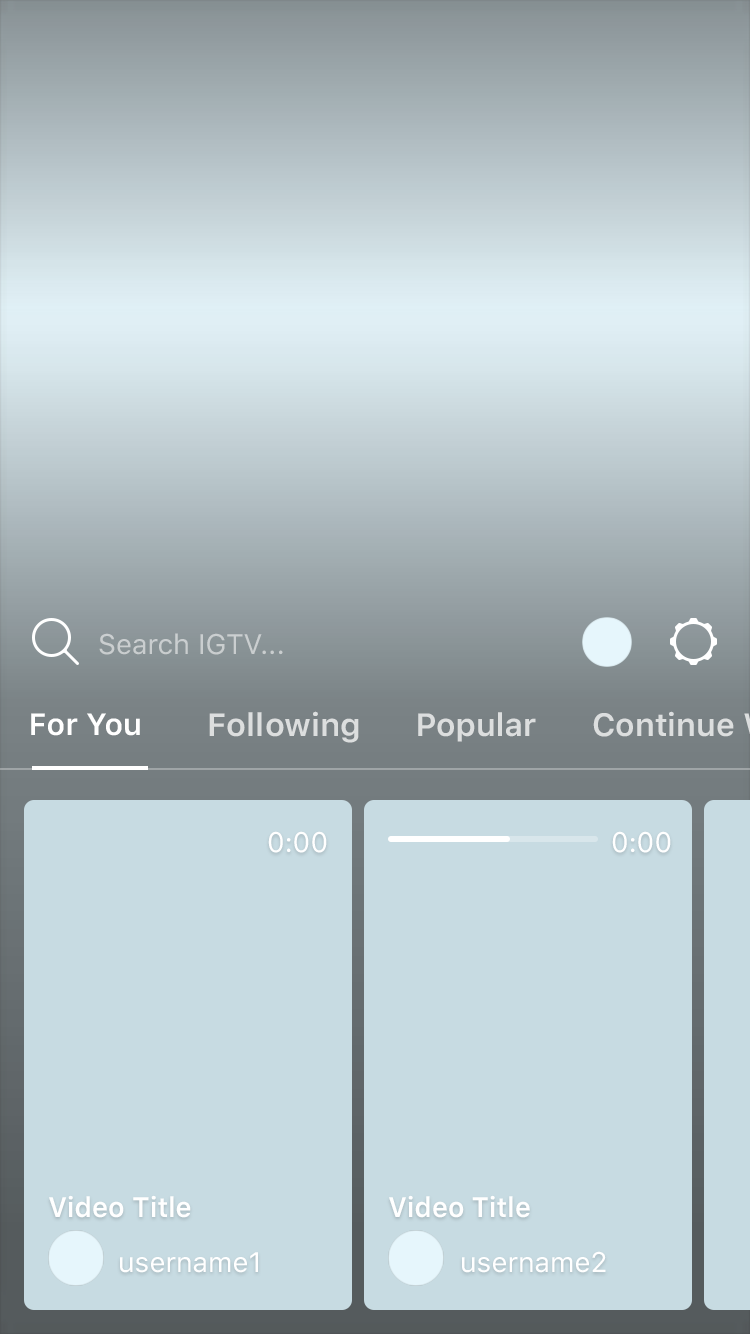
<style>
.page{position:relative;width:750px;height:1334px;background:#c7dbe2}
.page>*{position:absolute;margin:0}
.t1{font:28px "SFUIText-Regular";color:#cacecf}
.t2{font:30.6px "SFUIText-Semibold";color:#ffffff}
.t3{font:32px "SFUIText-Semibold";color:#dcdede}
.t4{font:28px "SFUIText-Regular";color:#ffffff}
.t5{font:28px "SFUIText-Semibold";color:#ffffff}
.t6{font:28px "SFUIText-Semibold";color:#ffffff;scale:0.97 1}
</style>
<div class="page">
<p class="t1" style="left:99px;top:633px;width:184px;height:22px">Search IGTV...</p>
<p class="t2" style="left:31px;top:713px;width:109px;height:23px">For You</p>
<p class="t3" style="left:209px;top:711px;width:150px;height:32px">Following</p>
<p class="t3" style="left:418px;top:712px;width:118px;height:30px">Popular</p>
<p class="t4" style="left:268px;top:831px;width:59px;height:22px">0:00</p>
<p class="t4" style="left:612px;top:831px;width:59px;height:22px">0:00</p>
<p class="t5" style="left:49px;top:1195px;width:142px;height:23px">Video Title</p>
<p class="t6" style="left:389px;top:1195px;width:141px;height:23px">Video Title</p>
<p class="t4" style="left:120px;top:1252px;width:138px;height:21px">username1</p>
<p class="t4" style="left:462px;top:1251px;width:144px;height:22px">username2</p>
</div>
